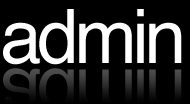
<style>
.page{position:relative;width:190px;height:104px;background:#000000}
.page>*{position:absolute;margin:0}
.t1{font:75px "Helvetica";letter-spacing:-0.06em;color:#ffffff}
.t2{font:75px "Helvetica";letter-spacing:-0.06em}
</style>
<div class="page">
<p class="t1" style="left:3px;top:9px;width:179px;height:56px">admin</p>
<p class="t2" style="left:3px;top:68px;width:179px;height:36px">admin</p>
</div>
